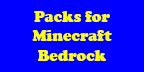
<style>
.page{position:relative;width:144px;height:72px;background:#0000ff}
.page>*{position:absolute;margin:0}
.t1{font:16px "CooperBlack";color:#ffff00}
</style>
<div class="page">
<p class="t1" style="left:32px;top:11px;width:80px;height:50px;text-align:center">Packs for<br>Minecraft<br>Bedrock</p>
</div>
